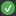
<style>
.page{position:relative;width:16px;height:16px;background:#55ab55}
.page>*{position:absolute;margin:0}
.t1{font:11px "HiraKakuProN-W3";color:#ffffff}
</style>
<div class="page">
<p class="t1" style="left:5px;top:5px;width:7px;height:7px">✓</p>
</div>
